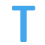
<style>
.page{position:relative;width:45px;height:45px;background:#ffffff}
.page>*{position:absolute;margin:0}
.t1{font:50px "Designosaur";color:#43a8eb}
</style>
<div class="page">
<p class="t1" style="left:12px;top:5px;width:24px;height:37px">T</p>
</div>
